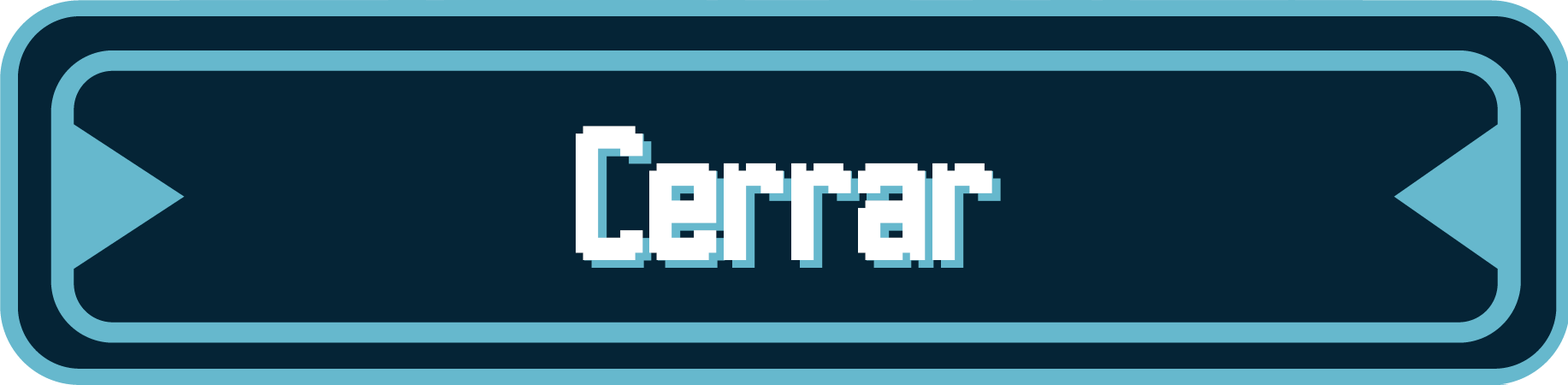
<style>
.page{position:relative;width:1568px;height:385px;background:#052436}
.page>*{position:absolute;margin:0}
.t1{font:171.1px "Hannover-Messe-Sans";color:#ffffff}
.t2{font:171.1px "Hannover-Messe-Sans"}
</style>
<div class="page">
<p class="t1" style="left:576px;top:126px;width:416px;height:134px">Cerrar</p>
<p class="t2" style="left:584px;top:133px;width:417px;height:135px">Cerrar</p>
</div>
